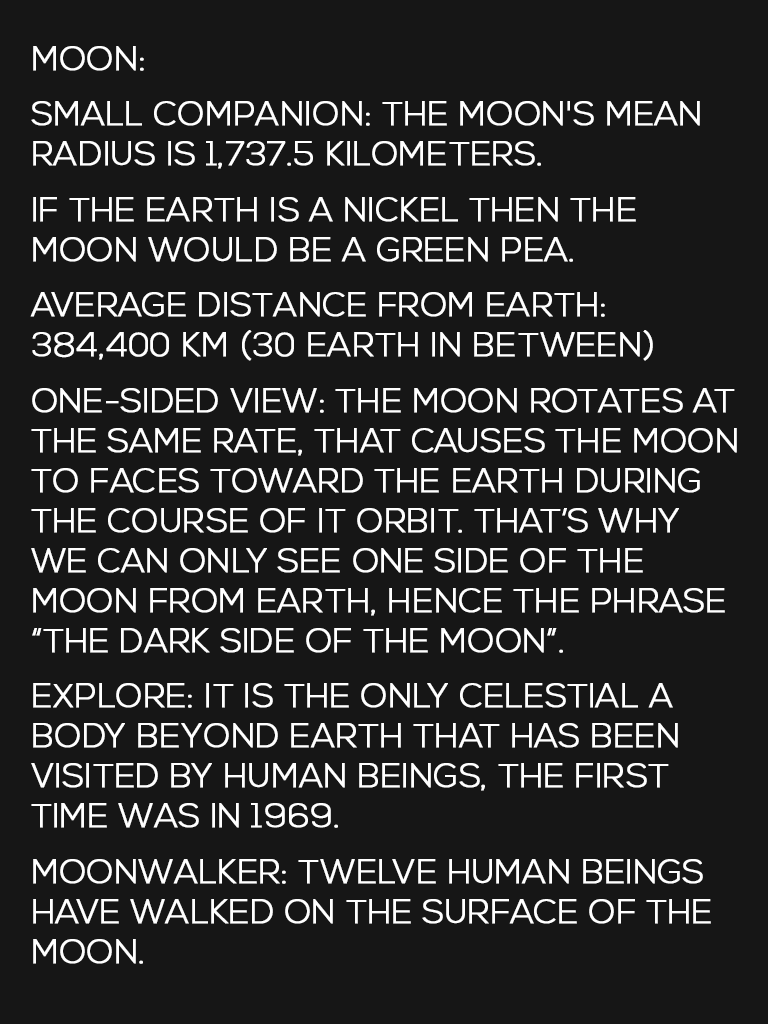
<style>
.page{position:relative;width:768px;height:1024px;background:#161616}
.page>*{position:absolute;margin:0}
.t1{font:33.3px "NexaLight";letter-spacing:-0.005em;color:#ffffff;text-transform:uppercase;font-weight:bold}
</style>
<div class="page">
<p class="t1" style="left:30px;top:46px;width:707px;height:918px">Moon:<br>Small companion: The moon's mean radius is 1,737.5 kilometers.<br>If the Earth is a nickel then the moon would be a green pea.<br>Average distance from Earth: 384,400 km (30 Earth in between)<br>One-Sided View: The moon rotates at the same rate, that causes the moon to faces toward the Earth during the course of it orbit. That’s why we can only see one side of the moon from Earth, hence the phrase “The dark side of the moon”.<br>Explore: It is the only celestial a body beyond Earth that has been visited by human beings, the first time was in 1969.<br>Moonwalker: Twelve human beings have walked on the surface of the moon.</p>
</div>
